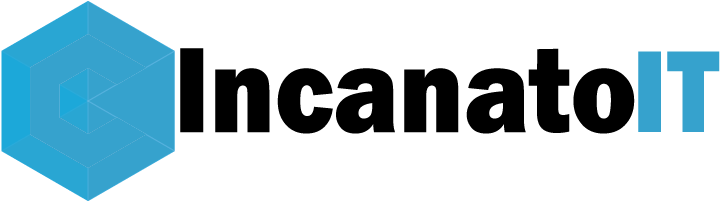
<style>
.page{position:relative;width:720px;height:202px;background:#ffffff}
.page>*{position:absolute;margin:0}
.t1{font:125.8px "FranklinGothic-Heavy";color:#000000;scale:0.89 1}
.t2{font:120.5px "FranklinGothic-Heavy";color:#36a2cd;scale:0.91 1}
</style>
<div class="page">
<p class="t1" style="left:180px;top:48px;width:455px;height:86px">Incanato</p>
<p class="t2" style="left:638px;top:51px;width:82px;height:81px">IT</p>
</div>
